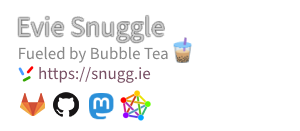
<style>
.page{position:relative;width:300px;height:131px;background:#ffffff}
.page>*{position:absolute;margin:0}
.t1{font:28px "SourceSans3-Regular";color:#cccccc}
.t2{font:17px "SourceSans3-Regular";color:#888888}
.t3{font:17px "SourceSans3-Regular";color:#795165}
</style>
<div class="page">
<p class="t1" style="left:18px;top:16px;width:146px;height:27px">Evie Snuggle</p>
<p class="t2" style="left:19px;top:46px;width:149px;height:37px">Fueled by Bubble Tea<br>      <span class="t3">https://snugg.ie</span></p>
</div>
